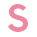
<style>
.page{position:relative;width:37px;height:37px;background:#ffffff}
.page>*{position:absolute;margin:0}
.t1{font:36.8px "HKExplorerSharp-SemiBold";letter-spacing:-0.035em;color:#ed88a1}
</style>
<div class="page">
<p class="t1" style="left:8px;top:4px;width:20px;height:28px">S</p>
</div>
